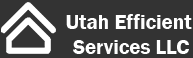
<style>
.page{position:relative;width:193px;height:58px;background:#333333}
.page>*{position:absolute;margin:0}
.t1{font:20.8px "FranklinGothic-Demi";color:#ffffff}
</style>
<div class="page">
<p class="t1" style="left:66px;top:14px;width:126px;height:40px;text-align:center">Utah Efficient <br>Services LLC</p>
</div>
